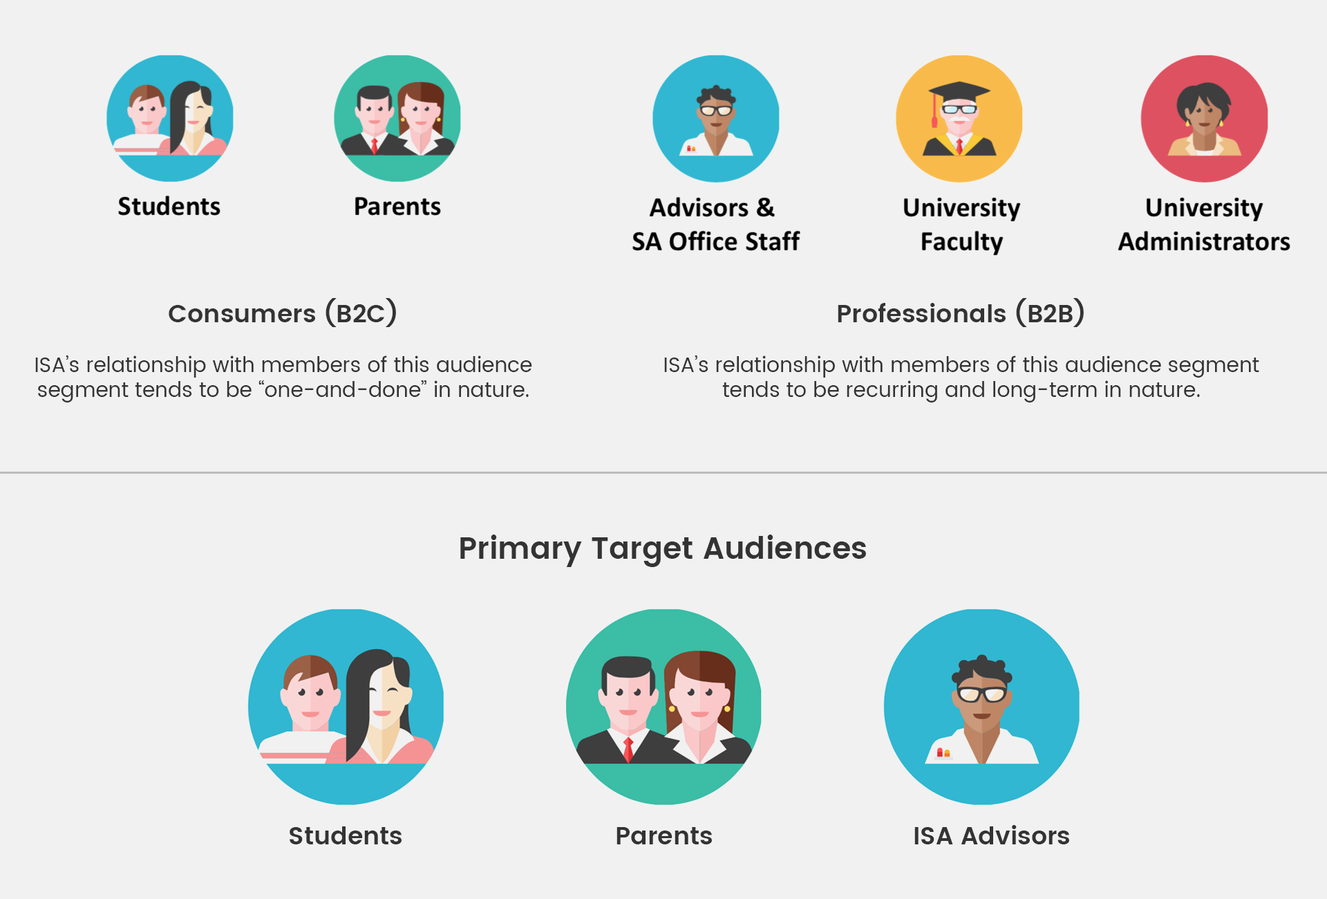
<style>
.page{position:relative;width:1327px;height:899px;background:#f1f1f1}
.page>*{position:absolute;margin:0}
.t1{font:20.7px/24.9px "Poppins-Regular";color:#333333}
.t2{font:24.9px/24.9px "Poppins-SemiBold";color:#333333}
.t3{font:30.4px "Poppins-SemiBold";color:#333333}
.t4{font:24.9px "Poppins-SemiBold";color:#333333}
</style>
<div class="page">
<p class="t1" style="left:35px;top:298px;width:497px;height:104px;text-align:center"><span class="t2">Consumers (B2C)<br><br></span>ISA’s relationship with members of this audience<br>segment tends to be “one-and-done” in nature.</p>
<p class="t1" style="left:664px;top:298px;width:595px;height:104px;text-align:center"><span class="t2">Professionals (B2B)<br><br></span>ISA’s relationship with members of this audience segment<br>tends to be recurring and long-term in nature.</p>
<p class="t3" style="left:460px;top:534px;width:406px;height:33px">Primary Target Audiences</p>
<p class="t4" style="left:290px;top:826px;width:112px;height:18px">Students</p>
<p class="t4" style="left:617px;top:827px;width:95px;height:17px">Parents</p>
<p class="t4" style="left:914px;top:825px;width:155px;height:19px">ISA Advisors</p>
</div>
